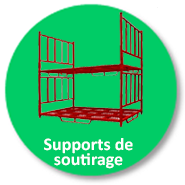
<style>
.page{position:relative;width:185px;height:185px;background:#00cc66}
.page>*{position:absolute;margin:0}
.t1{font:17.8px/15.8px "Calibri-Bold";color:#ffffff}
</style>
<div class="page">
<p class="t1" style="left:44px;top:138px;width:89px;height:31px;text-align:center">Supports de <br>soutirage</p>
</div>
